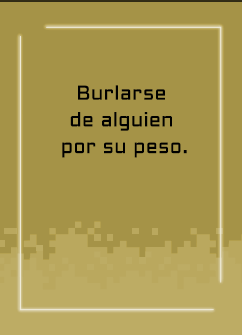
<style>
.page{position:relative;width:242px;height:335px;background:#a59347}
.page>*{position:absolute;margin:0}
.t1{font:20px/26.7px "Aldrich-Regular";letter-spacing:0.015em;color:#000000}
</style>
<div class="page">
<p class="t1" style="left:62px;top:85px;width:125px;height:73px;text-align:center">Burlarse <br>de alguien <br>por su peso.</p>
</div>
